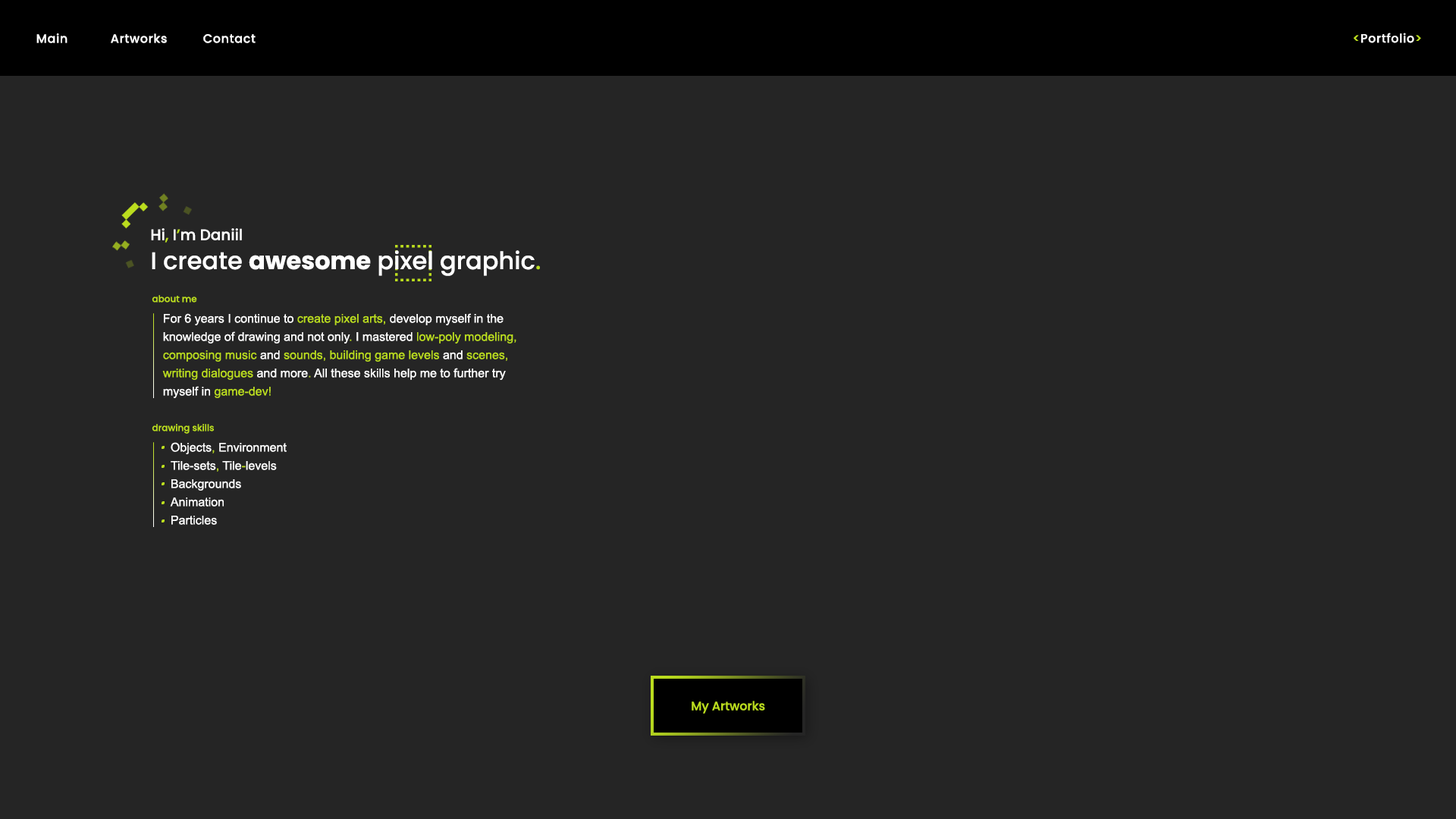
<style>
.page{position:relative;width:1456px;height:819px;background:#252525}
.page>*{position:absolute;margin:0}
.t1{font:12.1px "Poppins-Medium";letter-spacing:0.04em;color:#ffffff}
.t2{font:12.1px "Poppins-Medium";letter-spacing:0.04em;color:#bbdd1e}
.t3{font:24.3px "Poppins-Medium";color:#ffffff}
.t4{font:15.2px/15.2px "Poppins-Medium";color:#ffffff}
.t5{font:15.2px/15.2px "Poppins-Medium";color:#bbdd1e}
.t6{font:24.3px "Poppins-Bold";color:#ffffff}
.t7{font:24.3px "Poppins-Medium";color:#bbdd1e}
.t8{font:9.1px "Poppins-Medium";color:#bbdd1e}
.t9{font:12.1px/18.2px "ArialMT";color:#ffffff}
.t10{font:12.1px/18.2px "ArialMT";color:#bbdd1e}
.t11{font:12.1px "Poppins-Medium";color:#bbdd1e}
</style>
<div class="page">
<p class="t1" style="left:36px;top:33px;width:31px;height:10px">Main</p>
<p class="t1" style="left:111px;top:33px;width:56px;height:10px">Artworks</p>
<p class="t1" style="left:203px;top:34px;width:53px;height:9px">Contact</p>
<p class="t1" style="left:1354px;top:33px;width:67px;height:10px"><span class="t2">&lt;</span>Portfolio<span class="t2">&gt;</span></p>
<p class="t3" style="left:151px;top:228px;width:389px;height:48px"><span class="t4">Hi</span><span class="t5">,</span><span class="t4"> I</span><span class="t5">’</span><span class="t4">m Daniil<br></span>I create <span class="t6">awesome</span> pixel graphic<span class="t7">.</span></p>
<p class="t8" style="left:152px;top:295px;width:45px;height:8px">about me</p>
<p class="t9" style="left:162px;top:313px;width:354px;height:85px">For 6 years I continue to <span class="t10">create pixel arts,</span> develop myself in the knowledge of drawing and not only<span class="t10">.</span> I mastered <span class="t10">low-poly modeling, composing music</span> and <span class="t10">sounds, building game levels</span> and <span class="t10">scenes, writing dialogues</span> and more<span class="t10">.</span> All these skills help me to further try myself in <span class="t10">game-dev!</span></p>
<p class="t8" style="left:152px;top:424px;width:62px;height:10px">drawing skills</p>
<p class="t9" style="left:170px;top:442px;width:117px;height:83px">Objects<span class="t10">,</span> Environment<br>Tile-sets<span class="t10">,</span> Tile<span class="t10">-</span>levels<br>Backgrounds<br>Animation<br>Particles</p>
<p class="t11" style="left:692px;top:701px;width:73px;height:13px">My Artworks</p>
</div>
